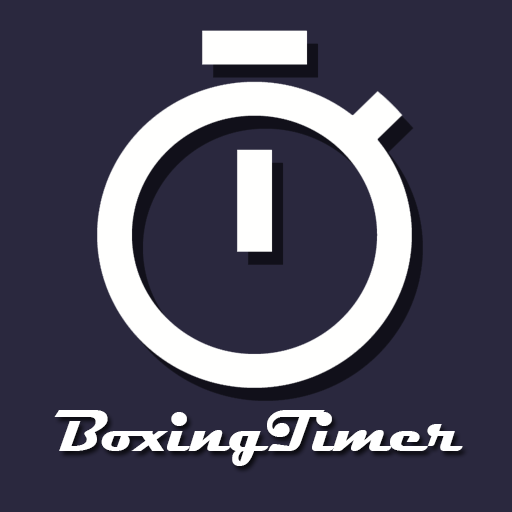
<style>
.page{position:relative;width:512px;height:512px;background:#2a283e}
.page>*{position:absolute;margin:0}
.t1{font:60px "Magneto-Bold";color:#ffffff}
</style>
<div class="page">
<p class="t1" style="left:54px;top:410px;width:409px;height:56px">BoxingTimer</p>
</div>
